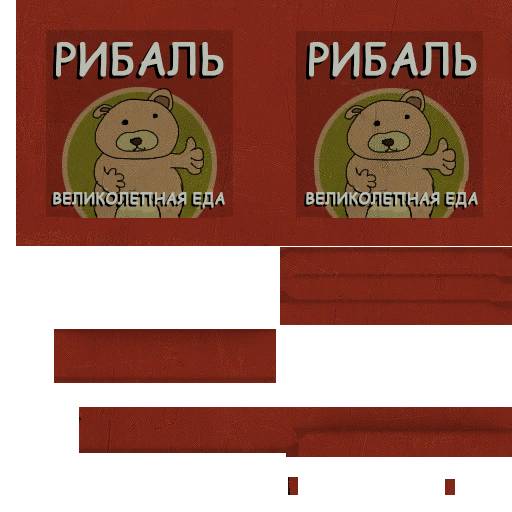
<style>
.page{position:relative;width:512px;height:512px;background:#ffffff}
.page>*{position:absolute;margin:0}
.t1{font:44px "ComicSansMS";color:#b8bcb0;font-weight:bold;scale:0.95 1}
.t2{font:16px "ComicSansMS";color:#b8bcb0;font-weight:bold;scale:0.95 1}
</style>
<div class="page">
<p class="t1" style="left:56px;top:42px;width:168px;height:35px">РИБАЛЬ</p>
<p class="t1" style="left:309px;top:42px;width:168px;height:35px">РИБАЛЬ</p>
<p class="t2" style="left:53px;top:192px;width:172px;height:16px">ВЕЛИКОЛЕПНАЯ ЕДА</p>
<p class="t2" style="left:306px;top:192px;width:172px;height:16px">ВЕЛИКОЛЕПНАЯ ЕДА</p>
</div>
